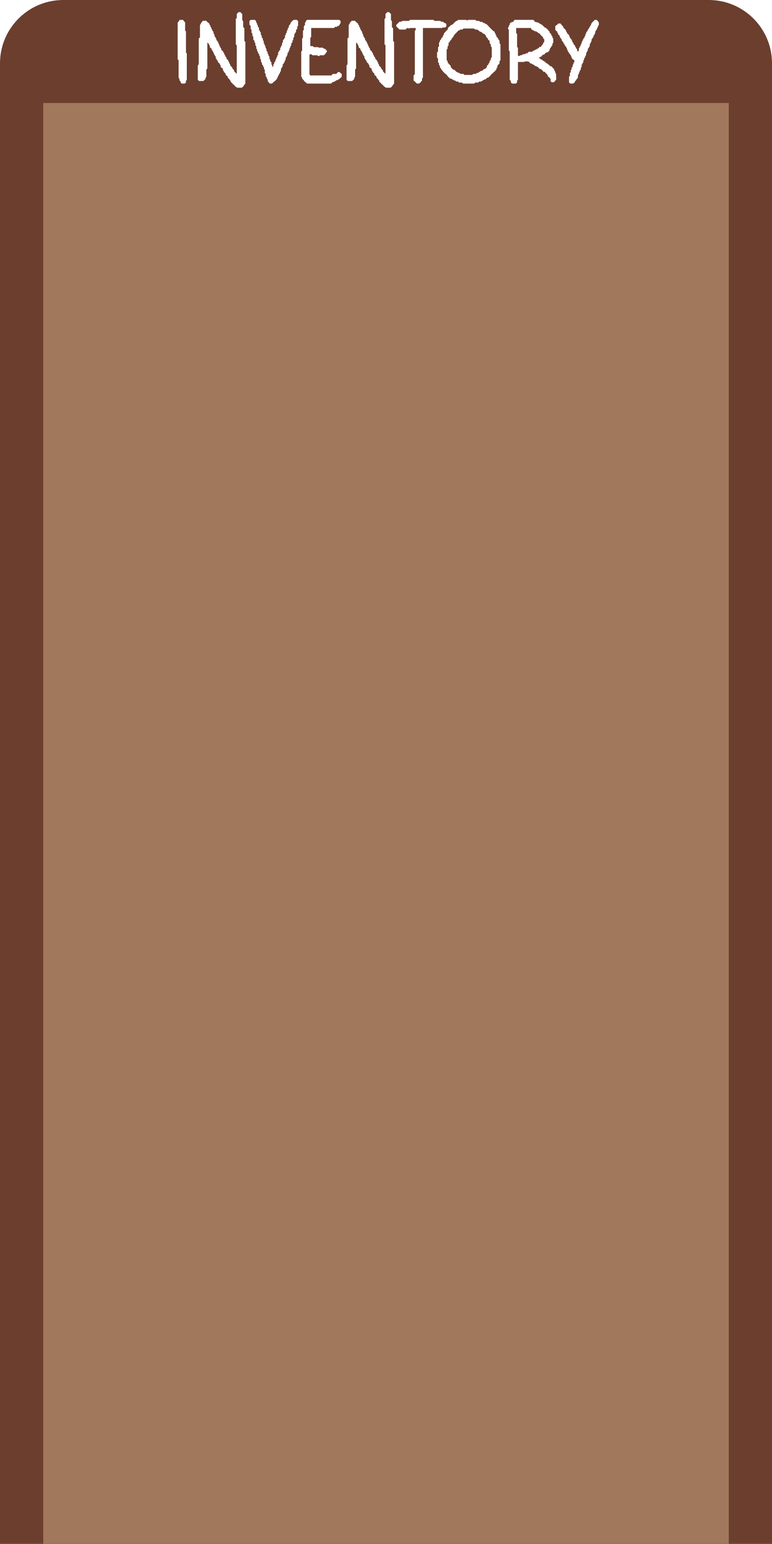
<style>
.page{position:relative;width:772px;height:1544px;background:#a1785c}
.page>*{position:absolute;margin:0}
.t1{font:87px "GavinScript2";color:#ffffff;font-weight:bold}
</style>
<div class="page">
<p class="t1" style="left:178px;top:12px;width:421px;height:76px">INVENTORY</p>
</div>
